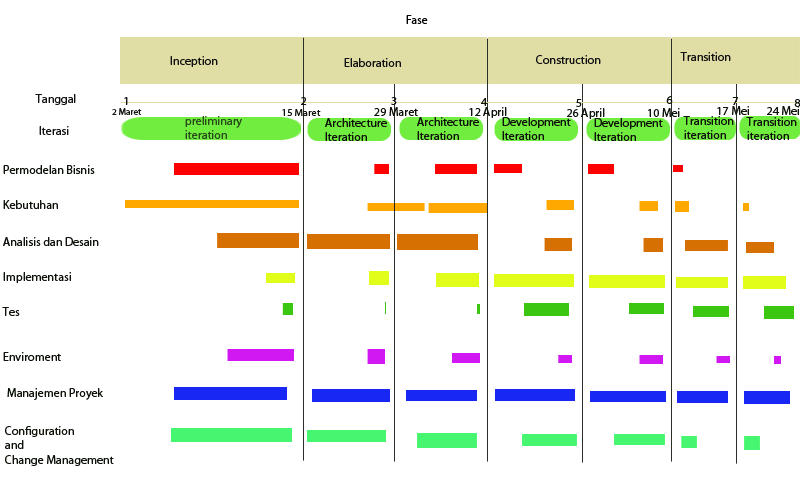
<style>
.page{position:relative;width:800px;height:480px;background:#ffffff}
.page>*{position:absolute;margin:0}
.t1{font:12px "MyriadPro-Regular";color:#020202}
.t2{font:12px "MyriadPro-Regular";color:#131313}
.t3{font:12px "MyriadPro-Regular";color:#0e130b}
.t4{font:9.2px "MyriadPro-Regular";color:#131313}
.t5{font:9.7px "MyriadPro-Regular";color:#0e130b;scale:1.09 1}
.t6{font:12px "MyriadPro-Regular";color:#294c1b}
</style>
<div class="page">
<p class="t1" style="left:406px;top:15px;width:22px;height:9px">Fase</p>
<p class="t2" style="left:680px;top:52px;width:51px;height:9px">Transition</p>
<p class="t2" style="left:170px;top:56px;width:48px;height:11px">Inception</p>
<p class="t2" style="left:344px;top:58px;width:57px;height:9px">Elaboration</p>
<p class="t2" style="left:536px;top:55px;width:65px;height:9px">Construction</p>
<p class="t2" style="left:35px;top:94px;width:41px;height:11px">Tanggal</p>
<p class="t2" style="left:124px;top:97px;width:4px;height:8px">1</p>
<p class="t2" style="left:301px;top:97px;width:6px;height:8px">2</p>
<p class="t2" style="left:391px;top:97px;width:6px;height:8px">3</p>
<p class="t3" style="left:481px;top:98px;width:7px;height:8px">4</p>
<p class="t3" style="left:576px;top:99px;width:6px;height:8px">5</p>
<p class="t3" style="left:666px;top:96px;width:7px;height:8px">6</p>
<p class="t3" style="left:732px;top:97px;width:6px;height:8px">7</p>
<p class="t3" style="left:794px;top:99px;width:7px;height:8px">8</p>
<p class="t4" style="left:112px;top:108px;width:30px;height:7px">2 Maret</p>
<p class="t5" style="left:282px;top:109px;width:39px;height:7px">15 Maret</p>
<p class="t3" style="left:374px;top:107px;width:44px;height:9px">29 Maret</p>
<p class="t3" style="left:469px;top:107px;width:38px;height:11px">12 April</p>
<p class="t3" style="left:567px;top:108px;width:38px;height:11px">26 April</p>
<p class="t3" style="left:648px;top:108px;width:32px;height:9px">10 Mei</p>
<p class="t3" style="left:717px;top:106px;width:32px;height:9px">17 Mei</p>
<p class="t3" style="left:767px;top:106px;width:32px;height:9px">24 Mei</p>
<p class="t2" style="left:39px;top:126px;width:30px;height:9px">Iterasi</p>
<p class="t6" style="left:185px;top:116px;width:57px;height:23px">preliminary <br>iteration</p>
<p class="t3" style="left:325px;top:118px;width:62px;height:23px">Architecture<br>Iteration</p>
<p class="t3" style="left:417px;top:117px;width:62px;height:23px">Architecture<br>Iteration</p>
<p class="t3" style="left:502px;top:117px;width:69px;height:23px">Development<br>Iteration</p>
<p class="t3" style="left:594px;top:118px;width:69px;height:23px">Development<br>Iteration</p>
<p class="t3" style="left:683px;top:116px;width:51px;height:23px">Transition<br>iteration</p>
<p class="t3" style="left:746px;top:117px;width:51px;height:23px">Transition<br>iteration</p>
<p class="t3" style="left:3px;top:165px;width:92px;height:9px">Permodelan Bisnis</p>
<p class="t3" style="left:3px;top:200px;width:55px;height:9px">Kebutuhan</p>
<p class="t3" style="left:3px;top:237px;width:96px;height:9px">Analisis dan Desain</p>
<p class="t3" style="left:3px;top:272px;width:68px;height:11px">Implementasi</p>
<p class="t3" style="left:2px;top:307px;width:18px;height:9px">Tes</p>
<p class="t3" style="left:3px;top:352px;width:58px;height:9px">Enviroment</p>
<p class="t3" style="left:7px;top:388px;width:96px;height:12px">Manajemen Proyek</p>
<p class="t3" style="left:5px;top:426px;width:109px;height:40px">Configuration<br>and <br>Change Management</p>
</div>
